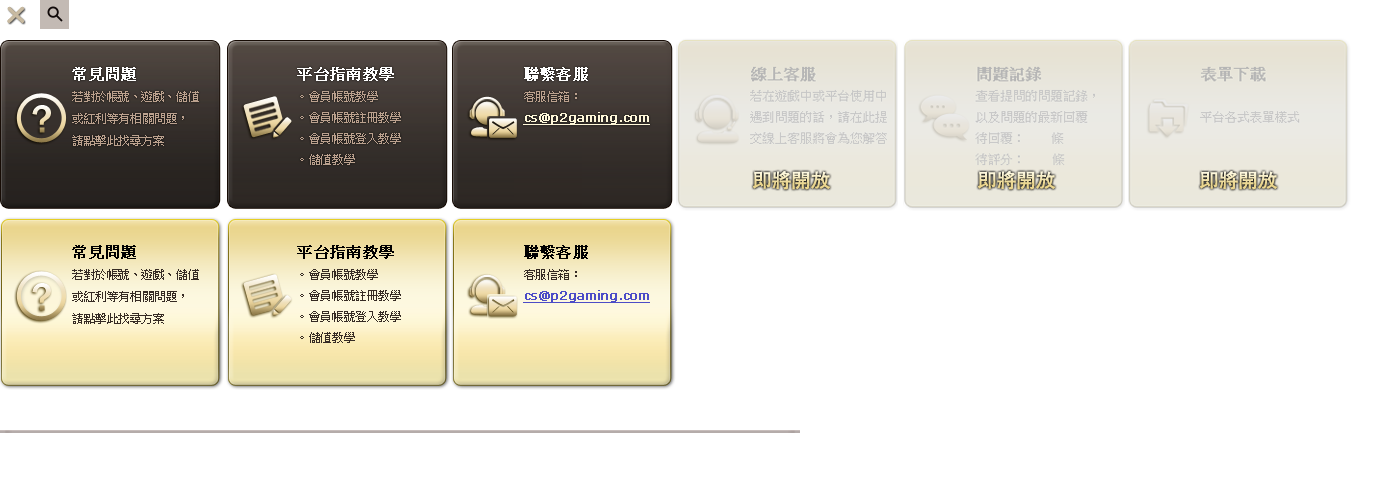
<style>
.page{position:relative;width:1400px;height:500px;background:#ffffff}
.page>*{position:absolute;margin:0}
.t1{font:12px/22px "PMingLiU";color:#bba18e}
.t2{font:15px/23.1px "PMingLiU";color:#ffffff;font-weight:bold}
.t3{font:12px/22px "PMingLiU";letter-spacing:0.1em;color:#bba18e}
.t4{font:12px/21.2px "PMingLiU";color:#bba18e}
.t5{font:12px/21.2px "Verdana";color:#fef7d9;font-weight:bold;text-decoration:underline}
.t6{font:40.8px "FranklinGothic-Medium"}
.t7{font:12px/22px "PMingLiU";color:#362b24}
.t8{font:15px/23.1px "PMingLiU";color:#000000;font-weight:bold}
.t9{font:12px/22px "PMingLiU";letter-spacing:0.1em;color:#362b24}
.t10{font:12px/21.2px "PMingLiU";color:#362b24}
.t11{font:12px/21.2px "Verdana";color:#4c4cc7;font-weight:bold;text-decoration:underline}
</style>
<div class="page">
<p class="t1" style="left:72px;top:67px;width:127px;height:79px"><span class="t2">常見問題<br></span>若對於帳號、遊戲、儲值<br>或紅利等有<span class="t3">相</span>關問題，<br>請點擊此找尋方案</p>
<p class="t4" style="left:297px;top:67px;width:104px;height:98px"><span class="t2">平台指南教學<br></span>。會員帳號教學<br>。會員帳號註冊教學<br>。會員帳號登入教學<br>。儲值教學</p>
<p class="t5" style="left:523px;top:67px;width:127px;height:58px"><span class="t2">聯繫客服<br></span><span class="t4">客服信箱：<br></span>cs@p2gaming.com</p>
<p class="t6" style="left:32px;top:105px;width:19px;height:28px">?</p>
<p class="t7" style="left:72px;top:245px;width:127px;height:79px"><span class="t8">常見問題<br></span>若對於帳號、遊戲、儲值<br>或紅利等有<span class="t9">相</span>關問題，<br>請點擊此找尋方案</p>
<p class="t10" style="left:297px;top:245px;width:104px;height:98px"><span class="t8">平台指南教學<br></span>。會員帳號教學<br>。會員帳號註冊教學<br>。會員帳號登入教學<br>。儲值教學</p>
<p class="t11" style="left:523px;top:245px;width:127px;height:58px"><span class="t8">聯繫客服<br></span><span class="t10">客服信箱：<br></span>cs@p2gaming.com</p>
</div>
